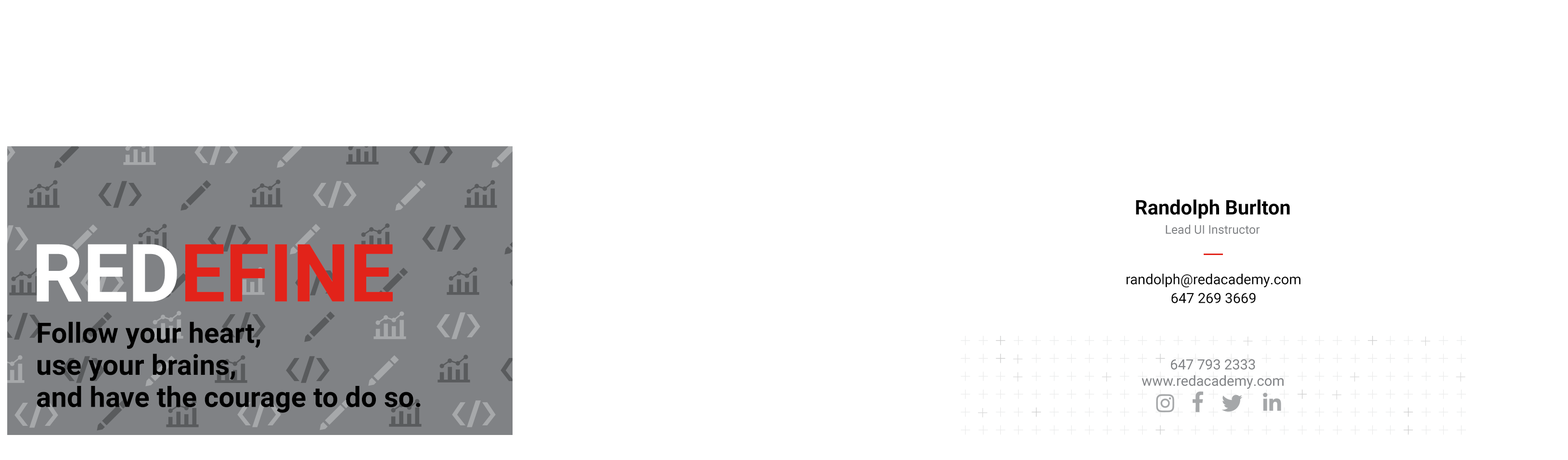
<style>
.page{position:relative;width:1568px;height:460px;background:#ffffff}
.page>*{position:absolute;margin:0}
.t1{font:20.1px "Roboto-Bold";color:#000000}
.t2{font:12px "Roboto-Regular";color:#808285}
.t3{font:80.2px "Roboto-Bold";color:#e2231a}
.t4{font:80.2px "Roboto-Bold";color:#ffffff}
.t5{font:14px "Roboto-Regular";color:#000000}
.t6{font:28.1px/32.1px "Roboto-Bold";color:#000000}
.t7{font:14px "Roboto-Regular";color:#808285}
</style>
<div class="page">
<p class="t1" style="left:1136px;top:199px;width:154px;height:20px">Randolph Burlton</p>
<p class="t2" style="left:1166px;top:225px;width:94px;height:9px">Lead UI Instructor</p>
<p class="t3" style="left:37px;top:244px;width:356px;height:58px"><span class="t4">RED</span>EFINE</p>
<p class="t5" style="left:1126px;top:273px;width:174px;height:15px">randolph@redacademy.com</p>
<p class="t5" style="left:1171px;top:293px;width:85px;height:10px">647 269 3669</p>
<p class="t6" style="left:37px;top:321px;width:384px;height:92px">Follow your heart,<br>use your brains, <br>and have the courage to do so.</p>
<p class="t7" style="left:1171px;top:359px;width:84px;height:11px">647 793 2333</p>
<p class="t7" style="left:1142px;top:375px;width:142px;height:14px">www.redacademy.com</p>
</div>
